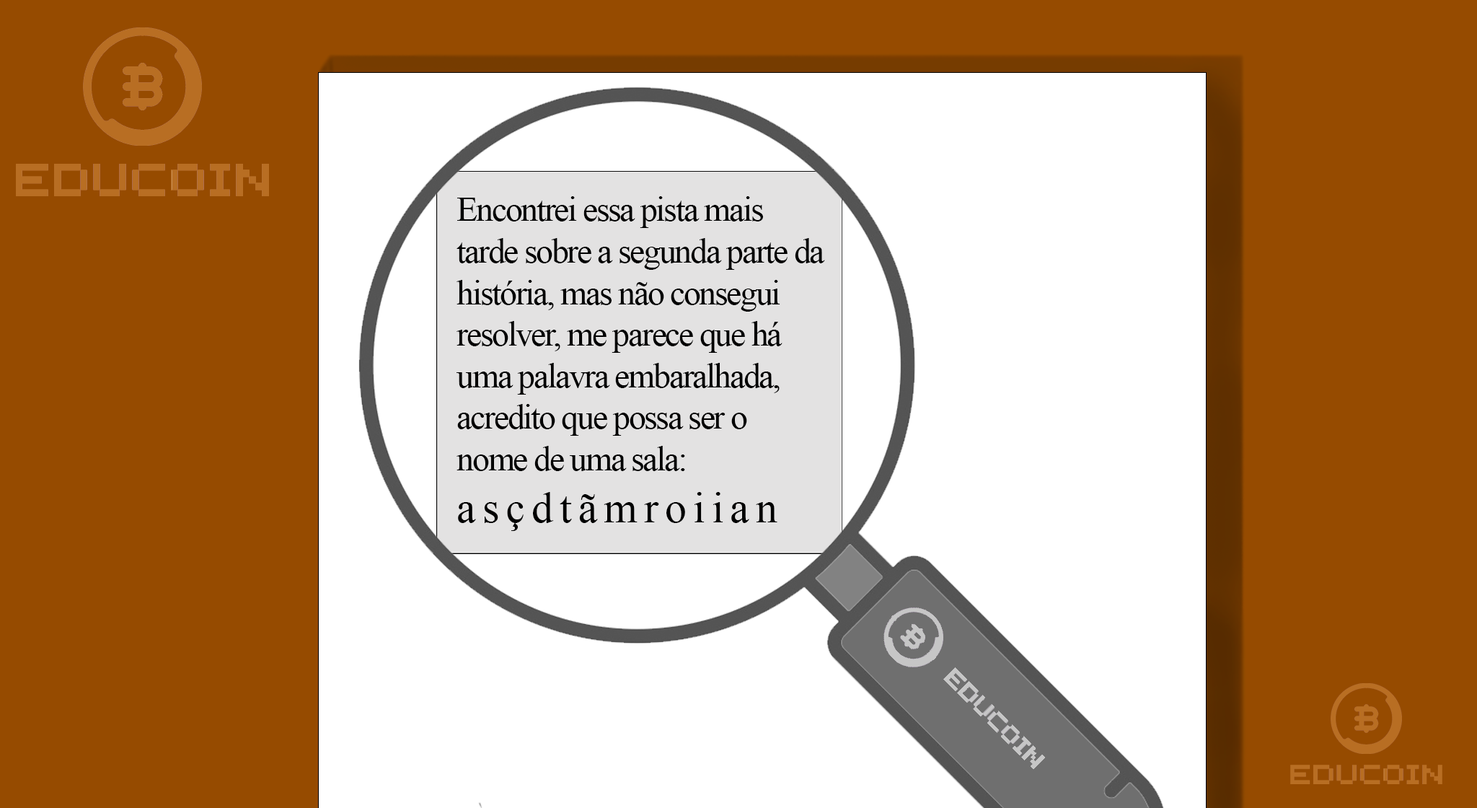
<style>
.page{position:relative;width:1477px;height:808px;background:#964b00}
.page>*{position:absolute;margin:0}
.t1{font:34.6px "TimesNewRomanPSMT";letter-spacing:-0.05em;color:#000000}
.t2{font:43.3px "TimesNewRomanPSMT";letter-spacing:-0.05em;color:#000000}
</style>
<div class="page">
<p class="t1" style="left:456px;top:196px;width:369px;height:335px">Encontrei essa pista mais <br>tarde sobre a segunda parte da <br>história, mas não consegui <br>resolver, me parece que há <br>uma palavra embaralhada, <br>acredito que possa ser o <br>nome de uma sala: <br><span class="t2">a s ç d t ã m r o i i a n</span></p>
</div>
